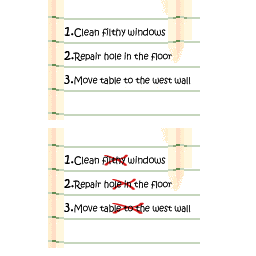
<style>
.page{position:relative;width:256px;height:256px;background:#ffffff}
.page>*{position:absolute;margin:0}
.t1{font:9.6px "KristenITC-Regular";color:#000000;scale:0.94 1}
.t2{font:13.1px "KristenITC-Regular";color:#000000;scale:0.94 1}
.t3{font:9.2px "KristenITC-Regular";color:#000000;scale:0.94 1}
</style>
<div class="page">
<p class="t1" style="left:64px;top:27px;width:102px;height:10px"><span class="t2">1.</span>Clean filthy windows</p>
<p class="t1" style="left:64px;top:27px;width:102px;height:10px"><span class="t2">1.</span>Clean filthy windows</p>
<p class="t3" style="left:64px;top:51px;width:108px;height:10px"><span class="t2">2.</span>Repair hole in the floor</p>
<p class="t3" style="left:64px;top:51px;width:108px;height:10px"><span class="t2">2.</span>Repair hole in the floor</p>
<p class="t3" style="left:64px;top:75px;width:127px;height:10px"><span class="t2">3.</span>Move table to the west wall</p>
<p class="t3" style="left:64px;top:75px;width:127px;height:10px"><span class="t2">3.</span>Move table to the west wall</p>
<p class="t1" style="left:64px;top:155px;width:102px;height:10px"><span class="t2">1.</span>Clean filthy windows</p>
<p class="t1" style="left:64px;top:155px;width:102px;height:10px"><span class="t2">1.</span>Clean filthy windows</p>
<p class="t3" style="left:64px;top:179px;width:108px;height:10px"><span class="t2">2.</span>Repair hole in the floor</p>
<p class="t3" style="left:64px;top:179px;width:108px;height:10px"><span class="t2">2.</span>Repair hole in the floor</p>
<p class="t3" style="left:64px;top:203px;width:127px;height:10px"><span class="t2">3.</span>Move table to the west wall</p>
<p class="t3" style="left:64px;top:203px;width:127px;height:10px"><span class="t2">3.</span>Move table to the west wall</p>
</div>
